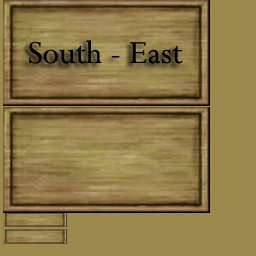
<style>
.page{position:relative;width:256px;height:256px;background:#9c894e}
.page>*{position:absolute;margin:0}
.t1{font:36px "Perpetua";color:#000000}
</style>
<div class="page">
<p class="t1" style="left:29px;top:40px;width:154px;height:24px">South - East</p>
</div>
